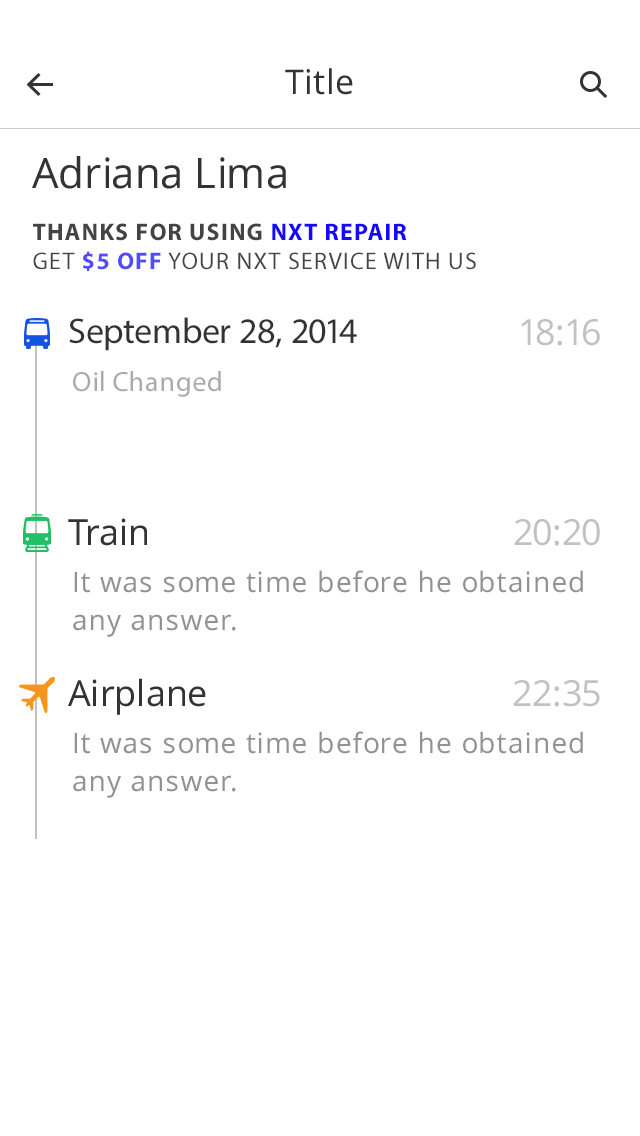
<style>
.page{position:relative;width:640px;height:1136px;background:#ffffff}
.page>*{position:absolute;margin:0}
.t1{font:34px "OpenSans";letter-spacing:0.01em;color:#333333}
.t2{font:42px "OpenSans";color:#333333}
.t3{font:24px "MyriadPro-Regular";letter-spacing:0.05em;color:#444444;text-transform:uppercase}
.t4{font:24px "MyriadPro-Bold";letter-spacing:0.05em;color:#444444;text-transform:uppercase}
.t5{font:24px "MyriadPro-Bold";letter-spacing:0.05em;color:#1408ff;text-transform:uppercase}
.t6{font:24px "MyriadPro-Bold";letter-spacing:0.05em;color:#534bff;text-transform:uppercase}
.t7{font:36px "MyriadPro-Regular";color:#333333}
.t8{font:36px "OpenSans";color:#c1c1c1}
.t9{font:28px "MyriadPro-Regular";letter-spacing:0.025em;color:#aaaaaa}
.t10{font:36px "OpenSans";color:#333333}
.t11{font:28px/38px "OpenSans";letter-spacing:0.025em;color:#929292}
</style>
<div class="page">
<p class="t1" style="left:285px;top:68px;width:68px;height:27px">Title</p>
<p class="t2" style="left:32px;top:156px;width:254px;height:33px">Adriana Lima</p>
<p class="t3" style="left:33px;top:223px;width:443px;height:48px"><span class="t4">THANKS FOR USING </span><span class="t5">NXT REPAIR  <br></span>GET<span class="t6"> $5 off </span>your nxt service WITH US</p>
<p class="t7" style="left:69px;top:317px;width:288px;height:34px">September 28, 2014</p>
<p class="t8" style="left:521px;top:319px;width:79px;height:27px">18:16</p>
<p class="t9" style="left:73px;top:371px;width:148px;height:26px">Oil Changed</p>
<p class="t10" style="left:68px;top:518px;width:79px;height:28px">Train</p>
<p class="t8" style="left:514px;top:519px;width:86px;height:27px">20:20</p>
<p class="t11" style="left:73px;top:570px;width:510px;height:67px">It was some time before he obtained any answer.</p>
<p class="t10" style="left:68px;top:678px;width:138px;height:37px">Airplane</p>
<p class="t8" style="left:513px;top:680px;width:87px;height:27px">22:35</p>
<p class="t11" style="left:73px;top:731px;width:510px;height:67px">It was some time before he obtained any answer.</p>
</div>
